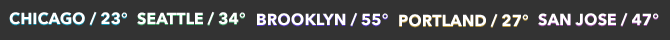
<style>
.page{position:relative;width:670px;height:40px;background:#333333}
.page>*{position:absolute;margin:0}
.t1{font:16px "AvenirNext-Bold";color:#ffffff;text-transform:uppercase}
</style>
<div class="page">
<p class="t1" style="left:9px;top:11px;width:118px;height:14px">Chicago / 23°</p>
<p class="t1" style="left:137px;top:11px;width:108px;height:14px">seattle / 34°</p>
<p class="t1" style="left:257px;top:12px;width:131px;height:14px">brooklyn / 55°</p>
<p class="t1" style="left:399px;top:13px;width:129px;height:14px">portland / 27°</p>
<p class="t1" style="left:538px;top:12px;width:121px;height:14px">san jose / 47°</p>
</div>
